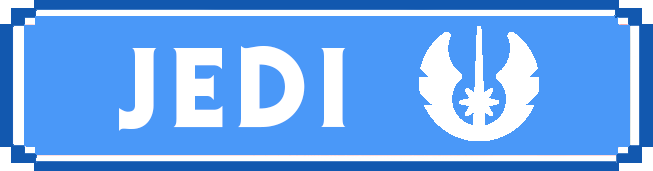
<style>
.page{position:relative;width:653px;height:171px;background:#4a98f8}
.page>*{position:absolute;margin:0}
.t1{font:111.6px "SerifGothic-Heavy";letter-spacing:0.08em;color:#ffffff}
</style>
<div class="page">
<p class="t1" style="left:119px;top:45px;width:227px;height:86px">JEDI</p>
</div>
